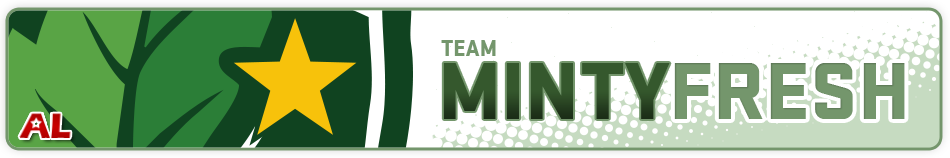
<style>
.page{position:relative;width:950px;height:158px;background:#ffffff}
.page>*{position:absolute;margin:0}
.t1{font:22.9px "StratumNo2Black";color:#74966c;text-transform:uppercase}
.t2{font:84.5px "StratumNo2Black";color:#35582d;text-transform:uppercase}
.t3{font:84.5px "StratumNo2Black";color:#74966c;text-transform:uppercase}
</style>
<div class="page">
<p class="t1" style="left:441px;top:40px;width:55px;height:16px">Team</p>
<p class="t2" style="left:443px;top:63px;width:227px;height:56px">Minty</p>
<p class="t3" style="left:674px;top:63px;width:231px;height:56px">Fresh</p>
</div>
